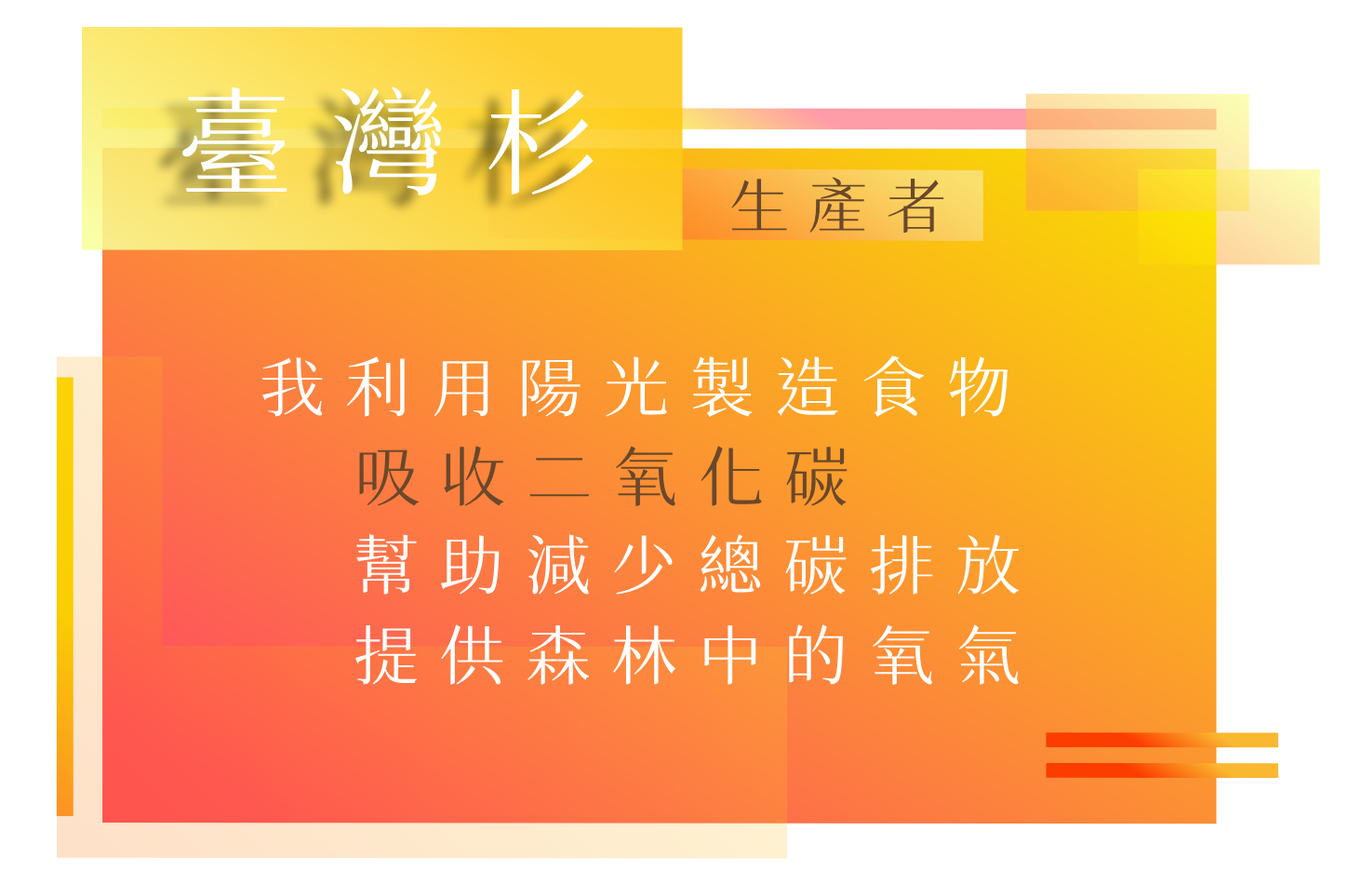
<style>
.page{position:relative;width:1349px;height:884px;background:#ffffff}
.page>*{position:absolute;margin:0}
.t1{font:116.3px "SweiSpringCJKtc-Regular";letter-spacing:0.32em;color:#ffffff;text-transform:uppercase}
.t2{font:59.5px "SweiSpringCJKtc-Regular";letter-spacing:0.32em;color:#6a482b;text-transform:uppercase}
.t3{font:65.1px "SweiSpringCJKtc-Regular";letter-spacing:0.32em;color:#ffffff;text-transform:uppercase}
.t4{font:65.1px "SweiSpringCJKtc-Regular";letter-spacing:0.32em;color:#6a482b;text-transform:uppercase}
</style>
<div class="page">
<p class="t1" style="left:180px;top:87px;width:414px;height:108px">臺灣杉</p>
<p class="t2" style="left:731px;top:177px;width:213px;height:56px">生產者</p>
<p class="t3" style="left:261px;top:355px;width:747px;height:63px">我利用陽光製造食物</p>
<p class="t4" style="left:359px;top:446px;width:489px;height:60px">吸收二氧化碳</p>
<p class="t3" style="left:356px;top:534px;width:663px;height:61px">幫助減少總碳排放</p>
<p class="t3" style="left:355px;top:624px;width:665px;height:62px">提供森林中的氧氣</p>
</div>
